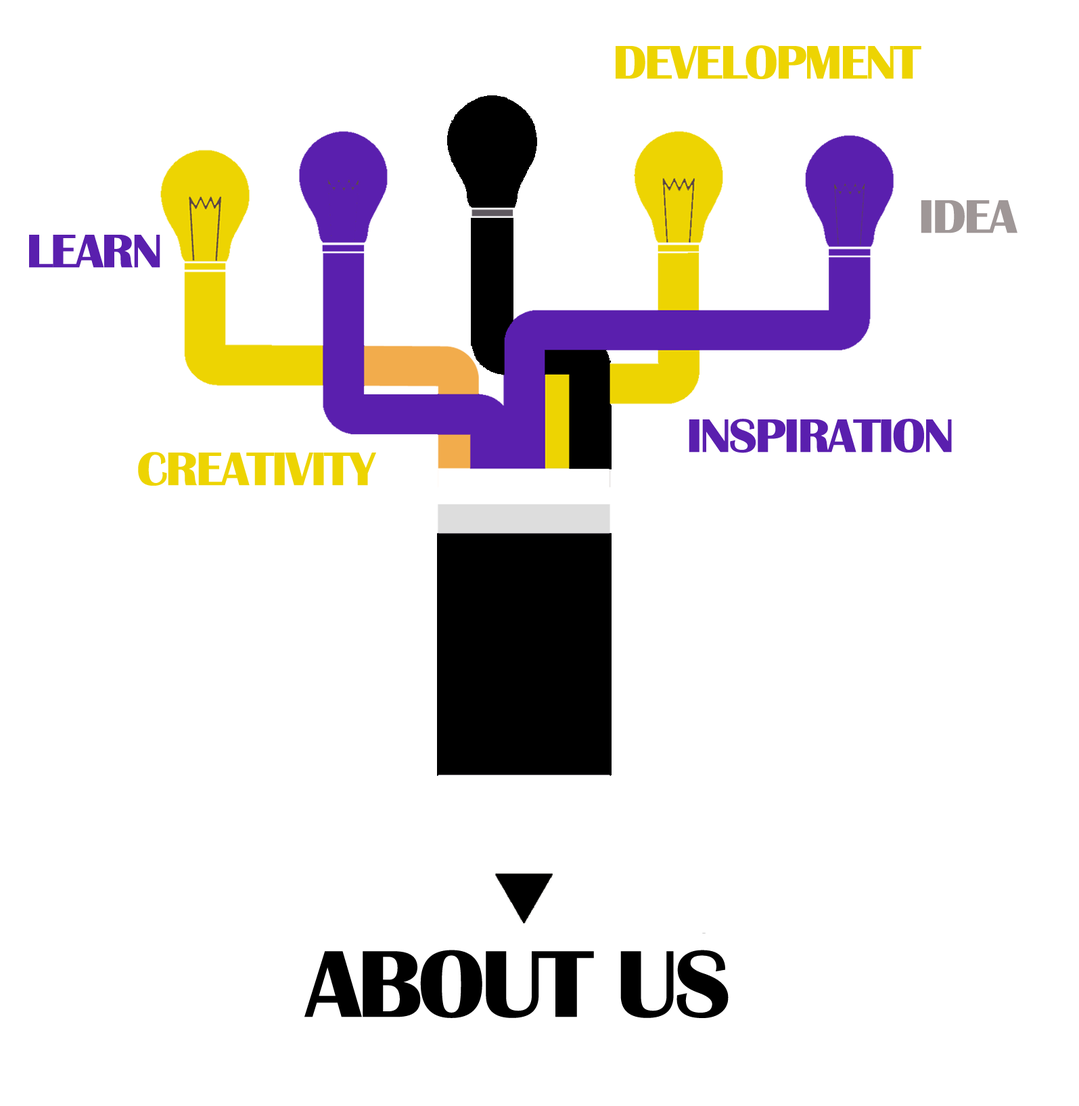
<style>
.page{position:relative;width:1079px;height:1106px;background:#ffffff}
.page>*{position:absolute;margin:0}
.t1{font:48.8px "BritannicBold";letter-spacing:-0.04em;color:#edd402;scale:1.05 1}
.t2{font:48.8px "BritannicBold";letter-spacing:-0.04em;color:#9f9797;scale:1.05 1}
.t3{font:48.8px "BritannicBold";letter-spacing:-0.04em;color:#5a1fae;scale:1.05 1}
.t4{font:98.2px "BritannicBold";letter-spacing:-0.04em;color:#000000;scale:1.05 1}
</style>
<div class="page">
<p class="t1" style="left:615px;top:45px;width:306px;height:34px">DEVELOPMENT</p>
<p class="t2" style="left:920px;top:200px;width:97px;height:33px">IDEA</p>
<p class="t3" style="left:29px;top:235px;width:131px;height:33px">LEARN</p>
<p class="t3" style="left:688px;top:419px;width:263px;height:34px">INSPIRATION</p>
<p class="t1" style="left:138px;top:452px;width:238px;height:34px">CREATIVITY</p>
<p class="t4" style="left:304px;top:949px;width:424px;height:69px">ABOUT US</p>
</div>
